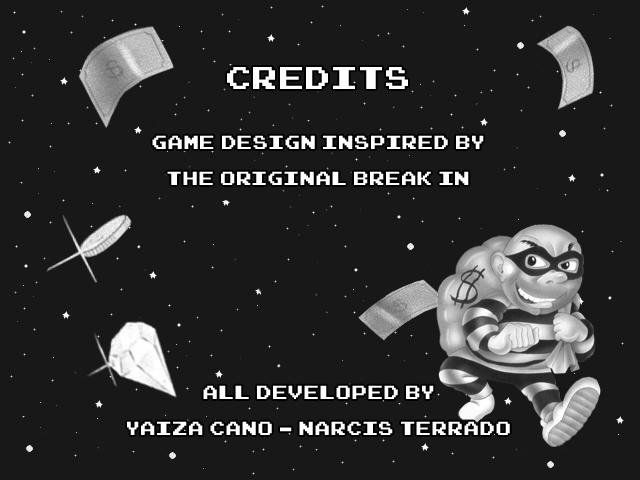
<style>
.page{position:relative;width:640px;height:480px;background:#181818}
.page>*{position:absolute;margin:0}
.t1{font:50px "Arcadepix-Plus";color:#ffffff}
.t2{font:30px "Arcadepix-Plus";color:#ffffff}
</style>
<div class="page">
<p class="t1" style="left:227px;top:67px;width:181px;height:22px">CREDITS</p>
<p class="t2" style="left:152px;top:135px;width:332px;height:50px;text-align:center">GAME DESIGN INSPIRED BY<br>THE ORIGINAL BREAK IN</p>
<p class="t2" style="left:127px;top:385px;width:383px;height:50px;text-align:center">ALL DEVELOPED BY<br>YAIZA CANO - NARCIS TERRADO</p>
</div>
